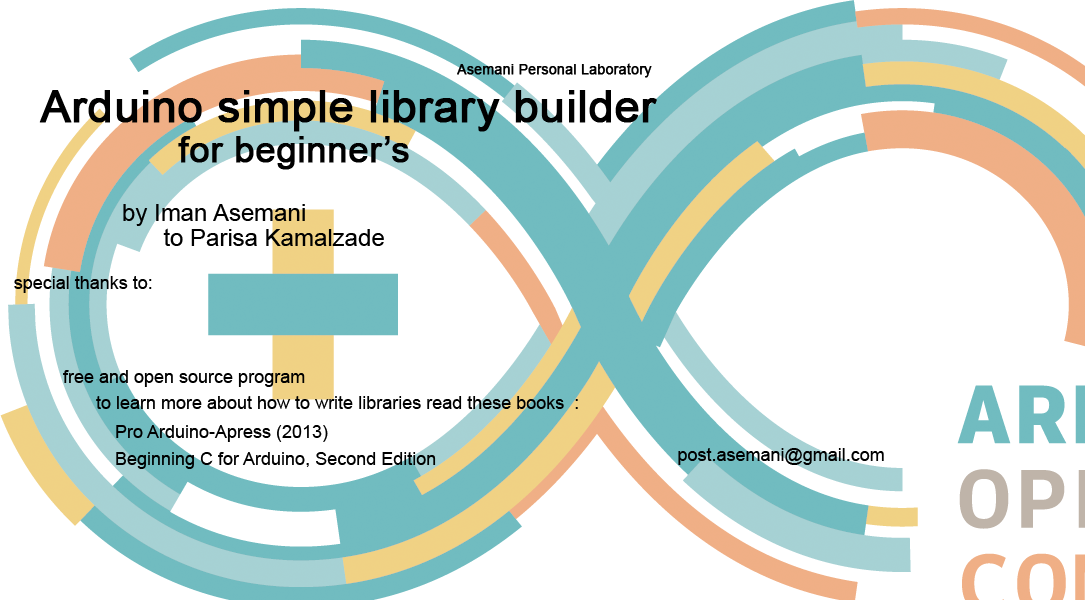
<style>
.page{position:relative;width:1085px;height:600px;background:#ffffff}
.page>*{position:absolute;margin:0}
.t1{font:14px "ArialMT";color:#000000;font-weight:bold}
.t2{font:45px "ArialMT";color:#000000;font-weight:bold}
.t3{font:36px "ArialMT";color:#000000;font-weight:bold}
.t4{font:24px "ArialMT";color:#000000}
.t5{font:18px "ArialMT";color:#000000}
</style>
<div class="page">
<p class="t1" style="left:457px;top:63px;width:195px;height:15px">Asemani Personal Laboratory</p>
<p class="t2" style="left:39px;top:90px;width:618px;height:42px">Arduino simple library builder</p>
<p class="t3" style="left:178px;top:136px;width:231px;height:34px">for beginner’s</p>
<p class="t4" style="left:123px;top:204px;width:182px;height:22px">by Iman Asemani</p>
<p class="t4" style="left:163px;top:228px;width:221px;height:18px">to Parisa Kamalzade</p>
<p class="t5" style="left:14px;top:276px;width:138px;height:17px">:special thanks to</p>
<p class="t5" style="left:63px;top:370px;width:242px;height:17px">free and open source program</p>
<p class="t5" style="left:96px;top:396px;width:482px;height:13px">:  to learn more about how to write libraries read these books</p>
<p class="t5" style="left:116px;top:425px;width:212px;height:17px">(Pro Arduino-Apress (2013</p>
<p class="t5" style="left:678px;top:448px;width:206px;height:17px">post.asemani@gmail.com</p>
<p class="t5" style="left:116px;top:452px;width:320px;height:17px">Beginning C for Arduino, Second Edition</p>
</div>
